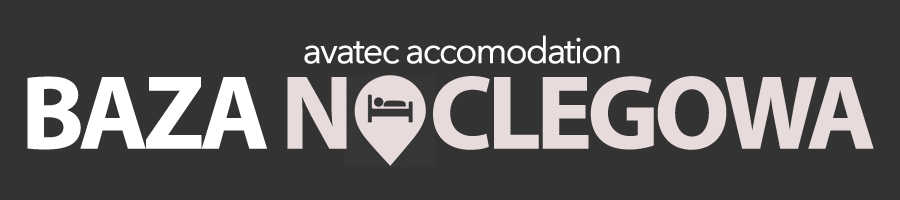
<style>
.page{position:relative;width:900px;height:200px;background:#333333}
.page>*{position:absolute;margin:0}
.t1{font:36px "AvenirNext-Regular";letter-spacing:-0.075em;color:#ffffff;font-weight:bold}
.t2{font:105.8px "MyriadPro-Bold";letter-spacing:-0.075em;color:#e7dbdb;font-weight:bold}
.t3{font:105.8px "MyriadPro-Bold";letter-spacing:-0.075em;color:#ffffff;font-weight:bold}
</style>
<div class="page">
<p class="t1" style="left:304px;top:35px;width:316px;height:29px">avatec accomodation</p>
<p class="t2" style="left:27px;top:76px;width:847px;height:74px"><span class="t3">BAZA </span>N     CLEGOWA</p>
</div>
